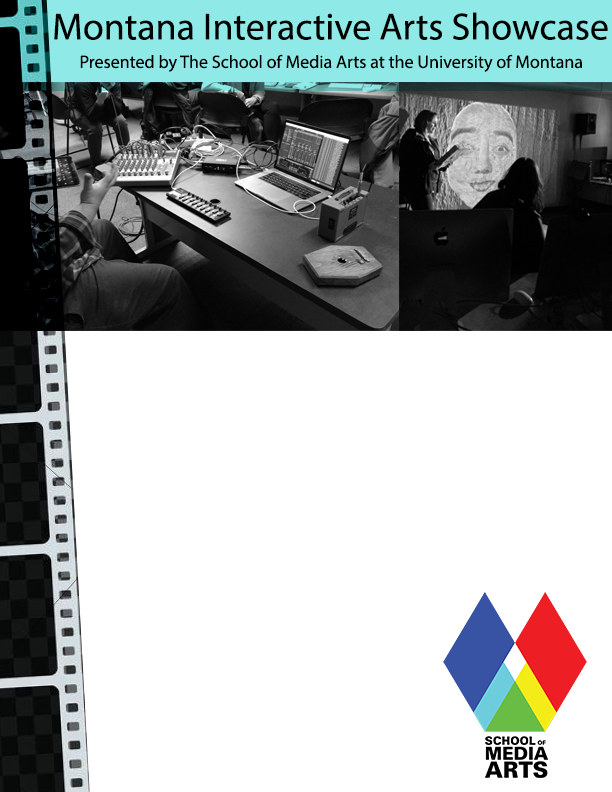
<style>
.page{position:relative;width:612px;height:792px;background:#ffffff}
.page>*{position:absolute;margin:0}
.t1{font:38px "MyriadPro-Regular";color:#000000}
.t2{font:18px "MyriadPro-Regular";color:#000000}
</style>
<div class="page">
<p class="t1" style="left:54px;top:12px;width:554px;height:28px">Montana Interactive Arts Showcase</p>
<p class="t2" style="left:80px;top:54px;width:502px;height:18px">Presented by The School of Media Arts at the University of Montana</p>
</div>
